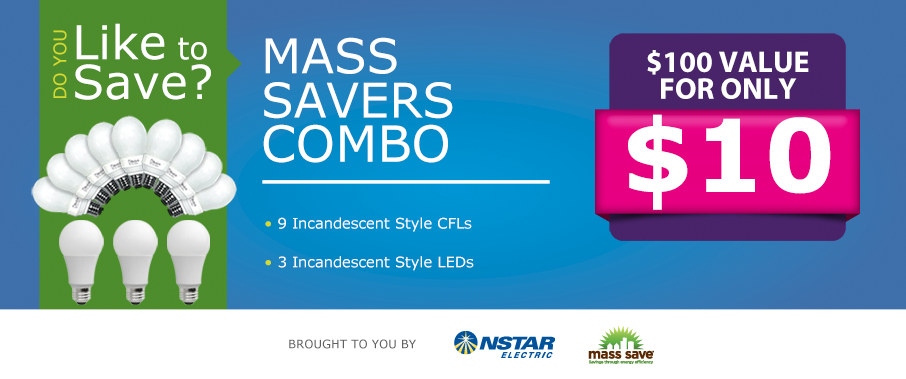
<style>
.page{position:relative;width:906px;height:379px;background:#ffffff}
.page>*{position:absolute;margin:0}
.t1{font:17.6px "Verdana";color:#d2da32}
.t2{font:46.8px/39.8px "Verdana";color:#ffffff}
.t3{font:30.7px/39.8px "Verdana";color:#ffffff}
.t4{font:47.7px/44.2px "Verdana";color:#ffffff}
.t5{font:49.9px/44.2px "Verdana";color:#ffffff}
.t6{font:30.1px/26.8px "MyriadPro-Bold";color:#ffffff}
.t7{font:100.3px "Verdana-Bold";color:#ffffff}
.t8{font:14.6px/38.6px "Verdana";color:#ffffff}
.t9{font:14.6px/38.6px "Verdana";color:#d2da32}
.t10{font:11.7px "Verdana";color:#606161}
</style>
<div class="page">
<p class="t1" style="left:53px;top:30px;width:14px;height:68px;rotate:-90deg">DO YOU</p>
<p class="t2" style="left:75px;top:23px;width:136px;height:77px;text-align:justify">Like<span class="t3"> to<br></span>Save?</p>
<p class="t4" style="left:263px;top:37px;width:190px;height:126px;text-align:justify">MASS <br>SAVERS<br><span class="t5">COMBO</span></p>
<p class="t6" style="left:647px;top:50px;width:162px;height:49px;text-align:center">$100 VALUE<br>FOR ONLY</p>
<p class="t7" style="left:628px;top:114px;width:203px;height:96px">$10</p>
<p class="t8" style="left:265px;top:217px;width:209px;height:54px;text-align:justify"><span class="t9">•</span> 9 Incandescent Style CFLs<br><span class="t9">• </span>3 Incandescent Style LEDs</p>
<p class="t10" style="left:289px;top:339px;width:127px;height:10px">BROUGHT TO YOU BY</p>
</div>
